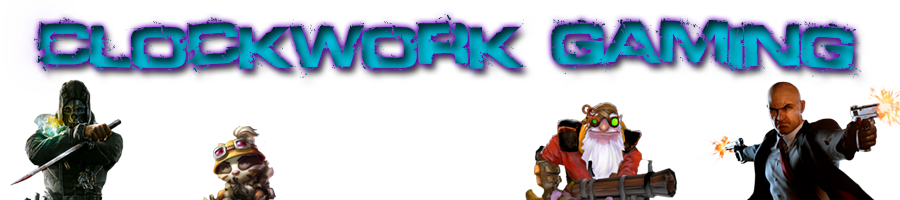
<style>
.page{position:relative;width:900px;height:200px;background:#ffffff}
.page>*{position:absolute;margin:0}
.t1{font:59.5px "Defused-ExtendedBold";color:#00c6e3}
</style>
<div class="page">
<p class="t1" style="left:34px;top:14px;width:828px;height:64px">Clockwork Gaming</p>
</div>
